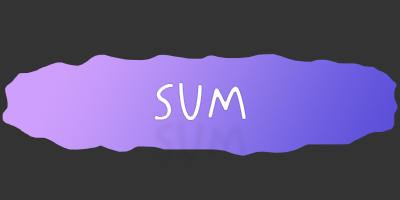
<style>
.page{position:relative;width:400px;height:200px;background:#333333}
.page>*{position:absolute;margin:0}
.t1{font:60px "Childhood";color:#ffffff}
</style>
<div class="page">
<p class="t1" style="left:153px;top:82px;width:94px;height:39px">Sum</p>
</div>
